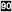
<style>
.page{position:relative;width:12px;height:12px;background:#cccccc}
.page>*{position:absolute;margin:0}
.t1{font:9px "ArialMT";color:#ffffff;font-weight:bold}
</style>
<div class="page">
<p class="t1" style="left:1px;top:2px;width:10px;height:8px">90</p>
</div>
